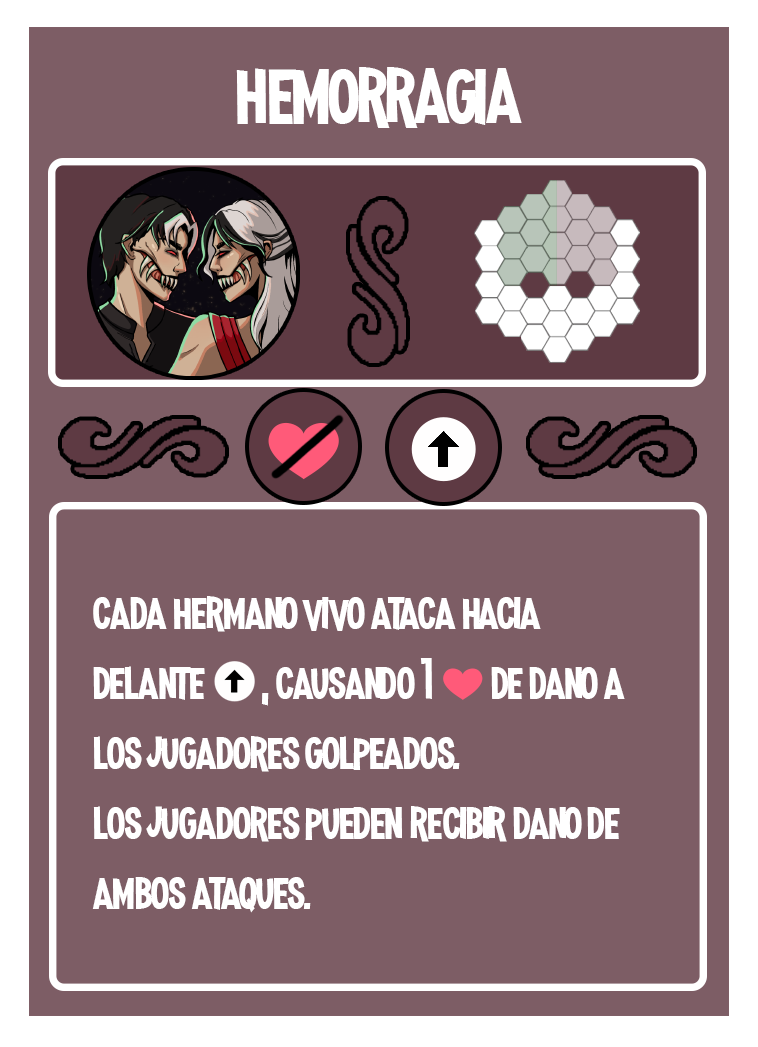
<style>
.page{position:relative;width:758px;height:1047px;background:#7d5d65}
.page>*{position:absolute;margin:0}
.t1{font:100px "MadnessHyperactive";color:#ffffff}
.t2{font:58.3px "MadnessHyperactive";color:#ffffff}
.t3{font:41.7px "EmojiOneColor";color:#ffffff}
</style>
<div class="page">
<p class="t1" style="left:236px;top:67px;width:286px;height:61px">hemorragia</p>
<p class="t2" style="left:92px;top:596px;width:533px;height:317px">cada hermano vivo ataca hacia      delante       , causando 1 <span class="t3">❤️ </span>de dano a   los jugadores golpeados.<br>los jugadores pueden recibir dano de ambos ataques.</p>
</div>
